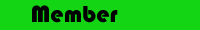
<style>
.page{position:relative;width:200px;height:30px;background:#13d513}
.page>*{position:absolute;margin:0}
.t1{font:24px "Bauhaus93";color:#000000}
</style>
<div class="page">
<p class="t1" style="left:32px;top:5px;width:86px;height:18px">Member</p>
</div>
